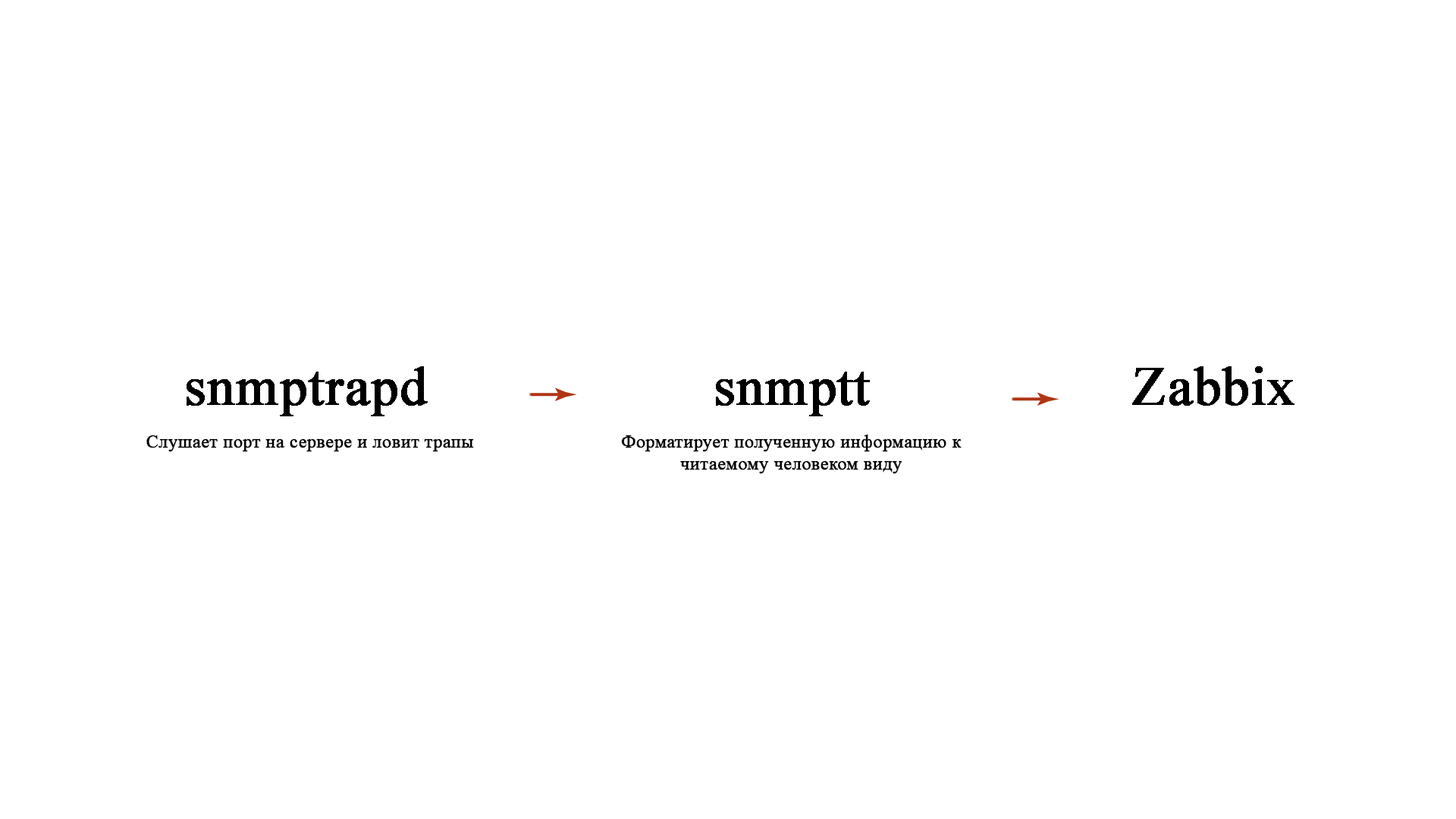
<style>
.page{position:relative;width:1456px;height:819px;background:#ffffff}
.page>*{position:absolute;margin:0}
.t1{font:54.6px "TimesNewRomanPSMT";color:#000000;font-weight:bold}
.t2{font:18.2px "TimesNewRomanPSMT";color:#000000;font-weight:bold}
</style>
<div class="page">
<p class="t1" style="left:187px;top:366px;width:241px;height:50px">snmptrapd</p>
<p class="t1" style="left:716px;top:372px;width:154px;height:44px">snmptt</p>
<p class="t1" style="left:1132px;top:366px;width:162px;height:40px">Zabbix</p>
<p class="t2" style="left:146px;top:435px;width:328px;height:17px">Слушает порт на сервере и ловит трапы</p>
<p class="t2" style="left:621px;top:435px;width:341px;height:39px;text-align:center">Форматирует полученную информацию к читаемому человеком виду</p>
</div>
